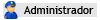
<style>
.page{position:relative;width:100px;height:20px;background:#e5e5e5}
.page>*{position:absolute;margin:0}
.t1{font:11px "TrebuchetMS";color:#000000}
</style>
<div class="page">
<p class="t1" style="left:24px;top:6px;width:70px;height:8px">Administrador</p>
</div>
